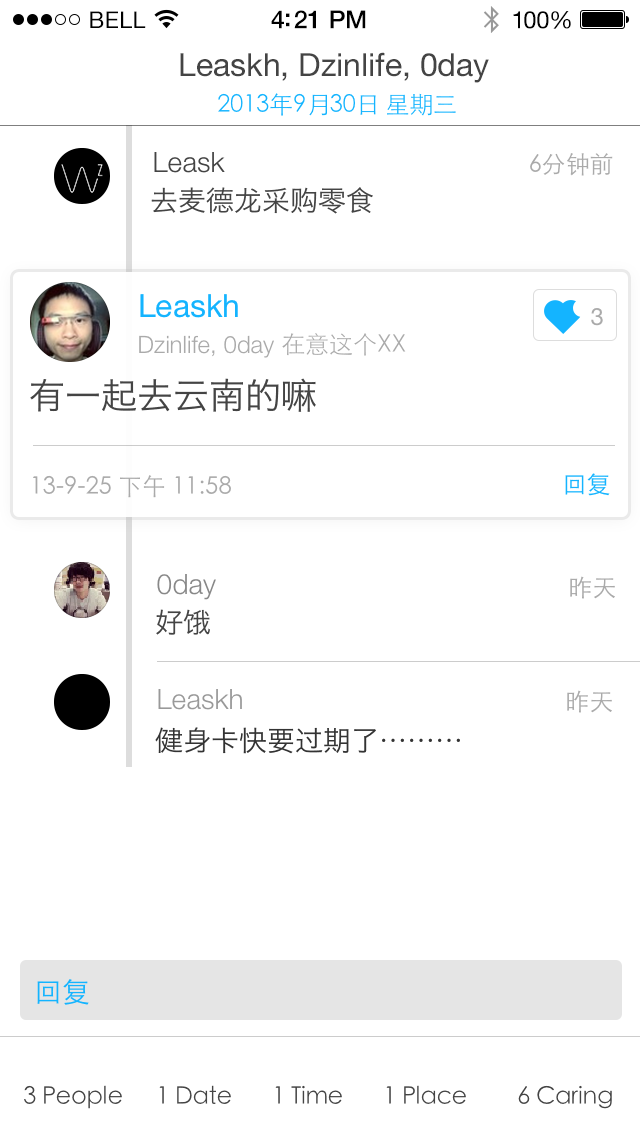
<style>
.page{position:relative;width:640px;height:1136px;background:#ffffff}
.page>*{position:absolute;margin:0}
.t1{font:23px "HelveticaNeue";letter-spacing:0.02em;color:#000000}
.t2{font:25px "HelveticaNeue-Medium";letter-spacing:-0.02em;color:#000000}
.t3{font:24px "HelveticaNeue";letter-spacing:-0.02em;color:#010101}
.t4{font:32px "HelveticaNeue";color:#444444}
.t5{font:24px "STHeitiSC-Thin";letter-spacing:-0.01em;color:#14b4ff}
.t6{font:28px "HelveticaNeue-Light";color:#444444}
.t7{font:24px "STHeitiSC-Light";color:#aaaaaa}
.t8{font:28px "HiraginoSansGB-W3";color:#444444}
.t9{font:32px "HelveticaNeue";color:#14b4ff}
.t10{font:24px "HelveticaNeue";color:#aaaaaa}
.t11{font:24px "HelveticaNeue-Light";color:#aaaaaa}
.t12{font:24px "STHeitiSC-Thin";color:#aaaaaa}
.t13{font:36px "HiraginoSansGB-W3";color:#444444}
.t14{font:24px "STHeitiSC-Light";color:#14b4ff}
.t15{font:28px "HelveticaNeue-Light";color:#888888}
.t16{font:28px "HelveticaNeue-Light";color:#999999}
.t17{font:28px "HiraginoSansGB-W3";color:#333333}
.t18{font:28px "STHeitiSC-Light";color:#14b4ff}
.t19{font:24px "STHeitiSC-Thin";letter-spacing:-0.01em;color:#444444}
</style>
<div class="page">
<p class="t1" style="left:90px;top:11px;width:56px;height:17px">BELL</p>
<p class="t2" style="left:271px;top:10px;width:95px;height:19px">4:21 PM</p>
<p class="t3" style="left:513px;top:11px;width:58px;height:18px">100%</p>
<p class="t4" style="left:180px;top:52px;width:309px;height:31px">Leaskh, Dzinlife, 0day</p>
<p class="t5" style="left:218px;top:93px;width:238px;height:23px">2013年9月30日 星期三</p>
<p class="t6" style="left:154px;top:152px;width:71px;height:21px">Leask</p>
<p class="t7" style="left:530px;top:153px;width:83px;height:23px">6分钟前</p>
<p class="t8" style="left:151px;top:187px;width:222px;height:27px">去麦德龙采购零食</p>
<p class="t9" style="left:140px;top:294px;width:98px;height:24px">Leaskh</p>
<p class="t10" style="left:591px;top:308px;width:12px;height:18px">3</p>
<p class="t11" style="left:139px;top:333px;width:267px;height:25px">Dzinlife, 0day <span class="t12">在意这个XX</span></p>
<p class="t13" style="left:30px;top:378px;width:286px;height:34px">有一起去云南的嘛？</p>
<p class="t14" style="left:565px;top:473px;width:45px;height:23px">回复</p>
<p class="t7" style="left:33px;top:475px;width:198px;height:23px">13-9-25 下午 11:58</p>
<p class="t15" style="left:157px;top:574px;width:59px;height:26px">0day</p>
<p class="t7" style="left:570px;top:576px;width:45px;height:23px">昨天</p>
<p class="t8" style="left:156px;top:609px;width:54px;height:26px">好饿</p>
<p class="t16" style="left:158px;top:689px;width:84px;height:21px">Leaskh</p>
<p class="t7" style="left:567px;top:690px;width:45px;height:23px">昨天</p>
<p class="t17" style="left:155px;top:727px;width:305px;height:27px">健身卡快要过期了………</p>
<p class="t18" style="left:37px;top:979px;width:52px;height:26px">回复</p>
<p class="t19" style="left:24px;top:1085px;width:98px;height:24px">3 People</p>
<p class="t19" style="left:159px;top:1085px;width:72px;height:19px">1 Date</p>
<p class="t19" style="left:275px;top:1085px;width:67px;height:19px">1 Time</p>
<p class="t19" style="left:386px;top:1085px;width:80px;height:19px">1 Place</p>
<p class="t19" style="left:518px;top:1085px;width:94px;height:24px">6 Caring</p>
</div>
